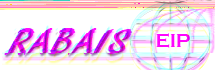
<style>
.page{position:relative;width:215px;height:70px;background:#ffffff}
.page>*{position:absolute;margin:0}
.t1{font:38px "ARBLANCA"}
</style>
<div class="page">
<p class="t1" style="left:4px;top:24px;width:124px;height:27px">RABAIS</p>
</div>
